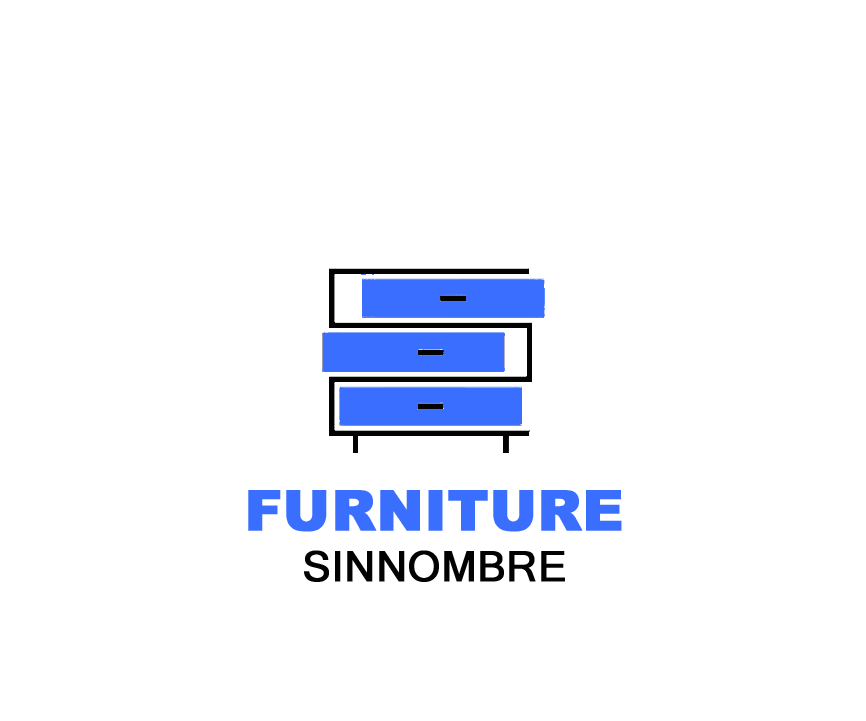
<style>
.page{position:relative;width:866px;height:721px;background:#ffffff}
.page>*{position:absolute;margin:0}
.t1{font:56px "Arial-Black";color:#3a6efe;text-transform:uppercase;font-weight:bold}
.t2{font:42px "MicrosoftSansSerif";color:#020202;text-transform:uppercase;font-weight:bold}
</style>
<div class="page">
<p class="t1" style="left:248px;top:490px;width:374px;height:42px">FURNITURE</p>
<p class="t2" style="left:304px;top:550px;width:261px;height:32px">SinNombre</p>
</div>
